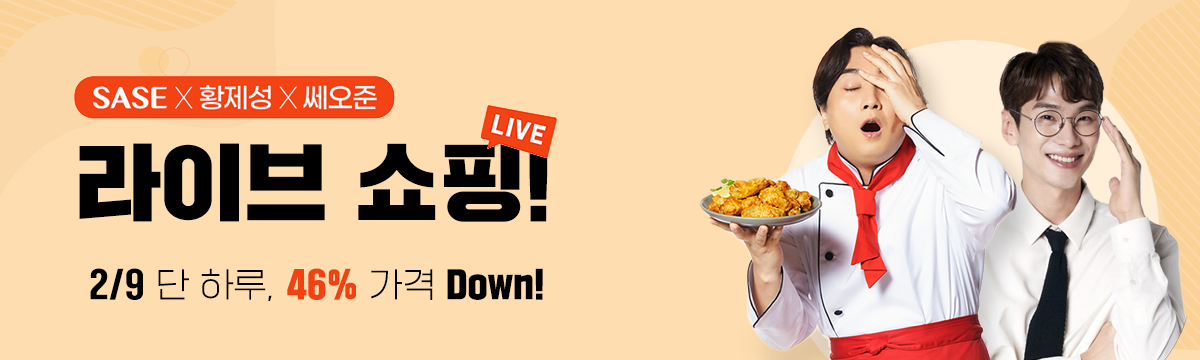
<style>
.page{position:relative;width:1200px;height:360px;background:#feddb0}
.page>*{position:absolute;margin:0}
.t1{font:83.9px "SDGyeokdongG207Bk";letter-spacing:0.01em;color:#000000}
.t2{font:83.9px "SDGyeokdongG207Bk";letter-spacing:0.01em;color:#e31f26}
.t3{font:33.4px "SDGyeokdongG203Lt";letter-spacing:0.01em;color:#000000}
.t4{font:33.4px "SDGyeokdongG206Hv";letter-spacing:0.01em;color:#000000}
.t5{font:33.4px "SDGyeokdongG207Bk";letter-spacing:0.01em;color:#f34212}
.t6{font:33.4px "SDGyeokdongG207Bk";letter-spacing:0.01em;color:#000000}
</style>
<div class="page">
<p class="t1" style="left:79px;top:143px;width:469px;height:79px"><span class="t2"> <br></span>라이브 쇼핑!</p>
<p class="t3" style="left:90px;top:268px;width:453px;height:33px"><span class="t4">2/9 </span>단 하루, <span class="t5">46% </span>가격 <span class="t6">Down!</span></p>
</div>
